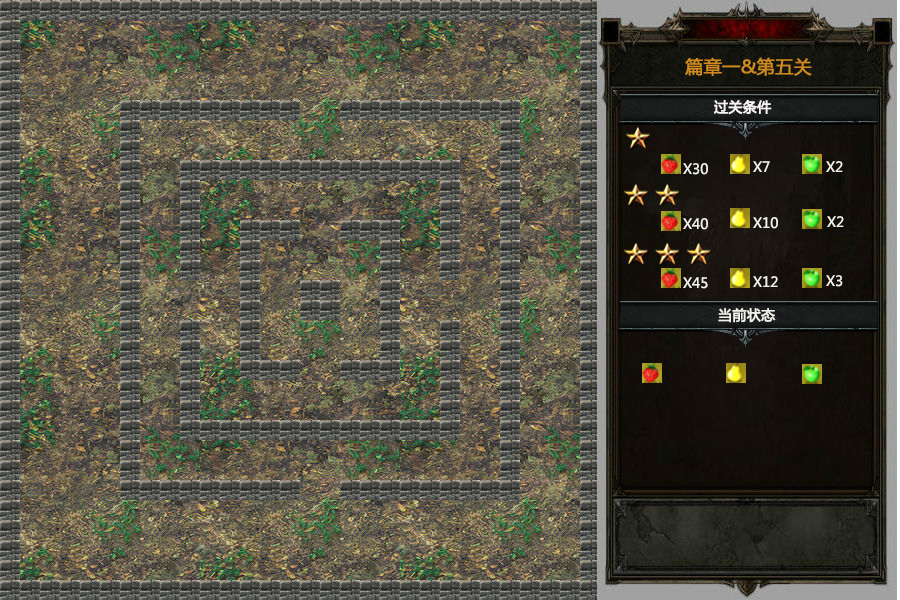
<style>
.page{position:relative;width:900px;height:600px}
.page>*{position:absolute;margin:0}
.t1{font:18px "MicrosoftYaHei";color:#cf8b20;font-weight:bold}
.t2{font:14px "MicrosoftYaHei";color:#f9f3f3;font-weight:bold}
.t3{font:14px "MicrosoftYaHei";color:#f1f0e9}
.t4{font:14px "MicrosoftYaHei";color:#f1f0e9;font-weight:bold}
</style>
<div class="page">
<p class="t1" style="left:685px;top:57px;width:127px;height:19px">篇章一&amp;第五关</p>
<p class="t2" style="left:714px;top:100px;width:58px;height:15px">过关条件</p>
<p class="t3" style="left:753px;top:161px;width:17px;height:11px">X7</p>
<p class="t3" style="left:826px;top:161px;width:17px;height:11px">X2</p>
<p class="t3" style="left:683px;top:163px;width:25px;height:12px">X30</p>
<p class="t3" style="left:683px;top:218px;width:25px;height:12px">X40</p>
<p class="t3" style="left:753px;top:217px;width:25px;height:12px">X10</p>
<p class="t3" style="left:827px;top:216px;width:17px;height:11px">X2</p>
<p class="t3" style="left:683px;top:277px;width:25px;height:12px">X45</p>
<p class="t3" style="left:753px;top:276px;width:25px;height:11px">X12</p>
<p class="t3" style="left:826px;top:275px;width:17px;height:12px">X3</p>
<p class="t4" style="left:718px;top:308px;width:58px;height:15px">当前状态</p>
</div>
